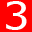
<style>
.page{position:relative;width:32px;height:32px;background:#ff0000}
.page>*{position:absolute;margin:0}
.t1{font:37.7px "Tahoma";color:#fffdfd;scale:1.21 1}
</style>
<div class="page">
<p class="t1" style="left:6px;top:1px;width:21px;height:29px">3</p>
</div>
